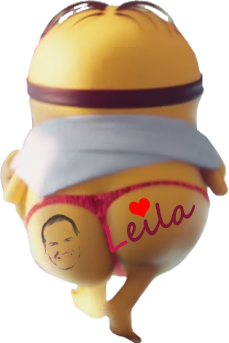
<style>
.page{position:relative;width:229px;height:343px;background:#ffffff}
.page>*{position:absolute;margin:0}
.t1{font:37.3px "SegoeScript-Bold";color:#7e1532;scale:0.9 1}
.t2{font:37.3px "SegoeScript-Bold";color:#c41948;scale:0.9 1}
</style>
<div class="page">
<p class="t1" style="left:104px;top:202px;width:91px;height:51px;rotate:-22deg"><span class="t2">L</span>eila</p>
</div>
